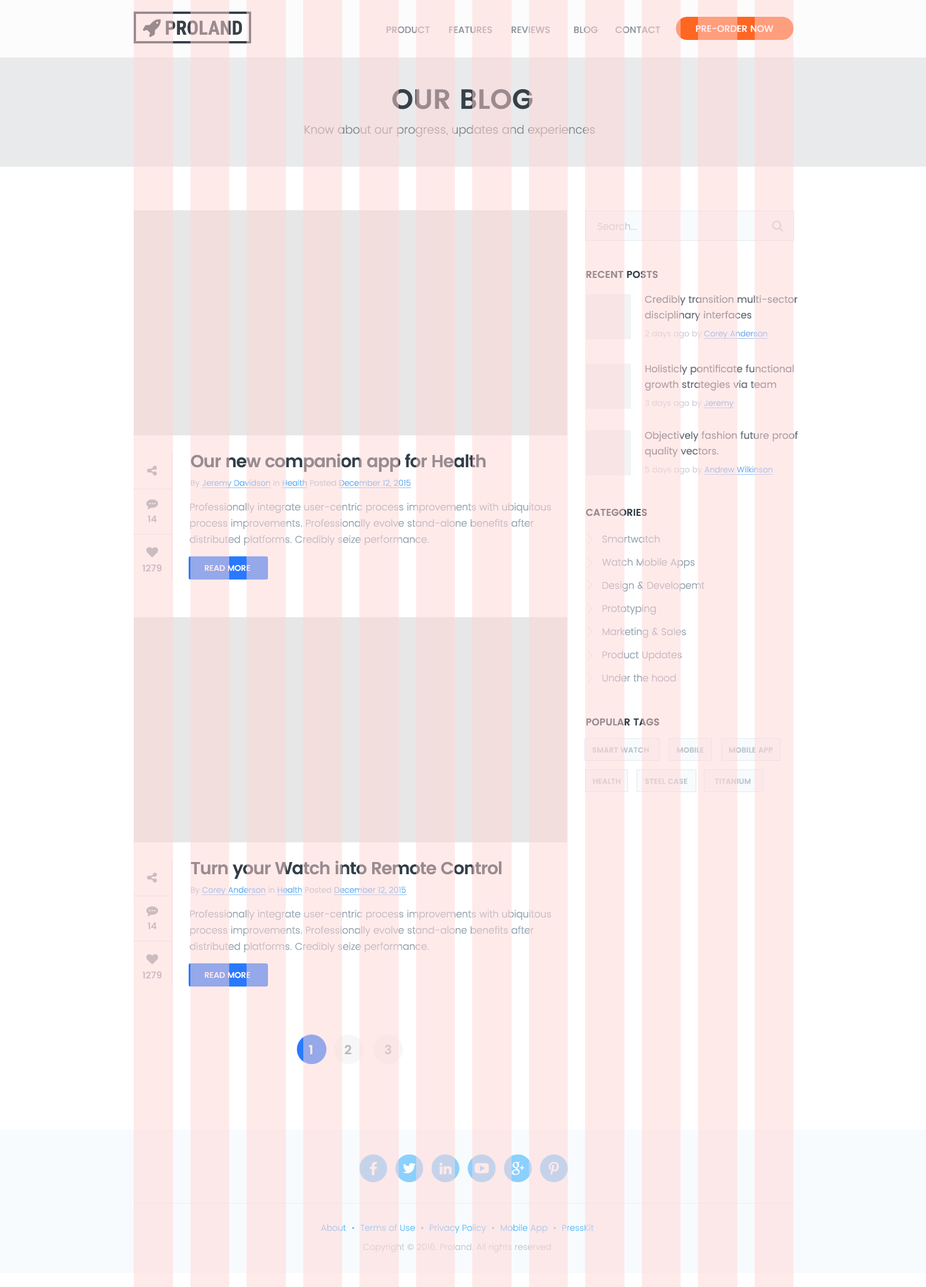
<style>
.page{position:relative;width:926px;height:1287px;background:#ffffff}
.page>*{position:absolute;margin:0}
.t1{font:9.3px "Poppins-Medium";text-transform:uppercase}
.t2{font:9.3px "Poppins-Medium";color:#ffffff;text-transform:uppercase}
.t3{font:27.8px "Poppins-SemiBold";text-transform:uppercase}
.t4{font:11.6px "Poppins-Light";color:#c1aeaf}
.t5{font:9.8px "Poppins-Light";color:#e0d0d3}
.t6{font:9.8px "Poppins-SemiBold";color:#998b90}
.t7{font:9.8px/15.6px "Poppins-Regular";color:#b2a2a6}
.t8{font:8.1px "Poppins-Light";color:#65a9f0;text-decoration:underline}
.t9{font:8.1px "Poppins-Light";color:#c7d0d8}
.t10{font:8.1px "Poppins-Light"}
.t11{font:8.1px "Poppins-Light";text-decoration:underline}
.t12{font:17.4px "Poppins-SemiBold";letter-spacing:-0.04em}
.t13{font:9.8px/16.2px "Poppins-Light";color:#c7bac1}
.t14{font:9.8px "Poppins-SemiBold"}
.t15{font:9.3px "Poppins-Medium";color:#cbbcc0}
.t16{font:9.8px/23.2px "Poppins-Light";color:#c7bac1}
.t17{font:8.1px "Poppins-Medium";color:#ffffff}
.t18{font:7.5px "Poppins-SemiBold";color:#decfd2}
.t19{font:7.5px "Poppins-SemiBold";color:#bdc7ce}
.t20{font:7.5px "Poppins-SemiBold"}
.t21{font:17.4px "Poppins-SemiBold";letter-spacing:-0.04em;color:#998b90}
.t22{font:12.7px "Poppins-SemiBold";color:#edf8fa}
.t23{font:12.7px "Poppins-SemiBold";color:#bcbcbc}
.t24{font:12.7px "Poppins-SemiBold";color:#dec9c9}
.t25{font:8.7px "Poppins-Light"}
.t26{font:8.7px "Poppins-Light";color:#e1d1d4}
</style>
<div class="page">
<p class="t1" style="left:387px;top:26px;width:274px;height:8px">Product FEATURES REVIEWS  BLOG CONTACT</p>
<p class="t2" style="left:696px;top:25px;width:78px;height:7px">Pre-Order Now</p>
<p class="t3" style="left:393px;top:89px;width:140px;height:20px">OUR BLOG</p>
<p class="t4" style="left:305px;top:124px;width:290px;height:13px">Know about our progress, updates and experiences</p>
<p class="t5" style="left:598px;top:222px;width:39px;height:8px">Search...</p>
<p class="t6" style="left:587px;top:270px;width:71px;height:9px">RECENT POSTS</p>
<p class="t7" style="left:645px;top:295px;width:153px;height:26px">Credibly transition multi-sector disciplinary interfaces</p>
<p class="t8" style="left:645px;top:330px;width:123px;height:9px"><span class="t9">2 days ago by </span>Corey Anderson</p>
<p class="t7" style="left:645px;top:364px;width:149px;height:27px">Holisticly pontificate functional growth strategies via team</p>
<p class="t10" style="left:645px;top:400px;width:89px;height:8px">3 days ago by <span class="t11">Jeremy</span></p>
<p class="t7" style="left:645px;top:431px;width:153px;height:26px">Objectively fashion future proof quality vectors.</p>
<p class="t12" style="left:191px;top:453px;width:295px;height:19px">Our new companion app for Health</p>
<p class="t8" style="left:646px;top:466px;width:128px;height:9px"><span class="t9">5 days ago by </span>Andrew Wilkinson</p>
<p class="t11" style="left:191px;top:479px;width:221px;height:9px"><span class="t10">By </span>Jeremy Davidson<span class="t10"> in </span>Health<span class="t10"> Posted </span>December 12, 2015</p>
<p class="t13" style="left:190px;top:503px;width:361px;height:42px">Professionally integrate user-centric process improvements with ubiquitous process improvements. Professionally evolve stand-alone benefits after distributed platforms. Credibly seize performance.</p>
<p class="t14" style="left:586px;top:508px;width:61px;height:8px">CATEGORIES</p>
<p class="t15" style="left:148px;top:515px;width:9px;height:7px">14</p>
<p class="t16" style="left:602px;top:535px;width:103px;height:147px">Smartwatch<br>Watch Mobile Apps<br>Design &amp; Developemt<br>Prototyping<br>Marketing &amp; Sales<br>Product Updates<br>Under the hood</p>
<p class="t15" style="left:142px;top:565px;width:20px;height:6px">1279</p>
<p class="t17" style="left:205px;top:565px;width:45px;height:6px">READ MORE</p>
<p class="t6" style="left:587px;top:718px;width:72px;height:8px">POPULAR TAGS</p>
<p class="t18" style="left:592px;top:747px;width:57px;height:6px">SMART WATCH</p>
<p class="t19" style="left:677px;top:747px;width:27px;height:6px">MOBILE</p>
<p class="t20" style="left:729px;top:747px;width:45px;height:6px">MOBILE APP</p>
<p class="t18" style="left:593px;top:778px;width:28px;height:6px">HEALTH</p>
<p class="t18" style="left:645px;top:778px;width:43px;height:7px">STEEL CASE</p>
<p class="t20" style="left:715px;top:778px;width:36px;height:7px">TITANIUM</p>
<p class="t21" style="left:191px;top:860px;width:311px;height:19px">Turn your Watch into Remote Control</p>
<p class="t11" style="left:191px;top:886px;width:215px;height:9px"><span class="t10">By </span>Corey Anderson<span class="t10"> in </span>Health<span class="t10"> Posted </span>December 12, 2015</p>
<p class="t13" style="left:190px;top:910px;width:361px;height:42px">Professionally integrate user-centric process improvements with ubiquitous process improvements. Professionally evolve stand-alone benefits after distributed platforms. Credibly seize performance.</p>
<p class="t15" style="left:148px;top:922px;width:9px;height:7px">14</p>
<p class="t15" style="left:142px;top:972px;width:20px;height:7px">1279</p>
<p class="t17" style="left:205px;top:972px;width:45px;height:7px">READ MORE</p>
<p class="t22" style="left:309px;top:1045px;width:4px;height:9px">1</p>
<p class="t23" style="left:345px;top:1045px;width:6px;height:9px">2</p>
<p class="t24" style="left:384px;top:1045px;width:7px;height:10px">3</p>
<p class="t25" style="left:321px;top:1224px;width:273px;height:9px">About  •  Terms of Use  •  Privacy Policy  •  Mobile App  •  PressKit</p>
<p class="t26" style="left:363px;top:1243px;width:188px;height:10px">Copyright © 2016. Proland. All rights reserved</p>
</div>
